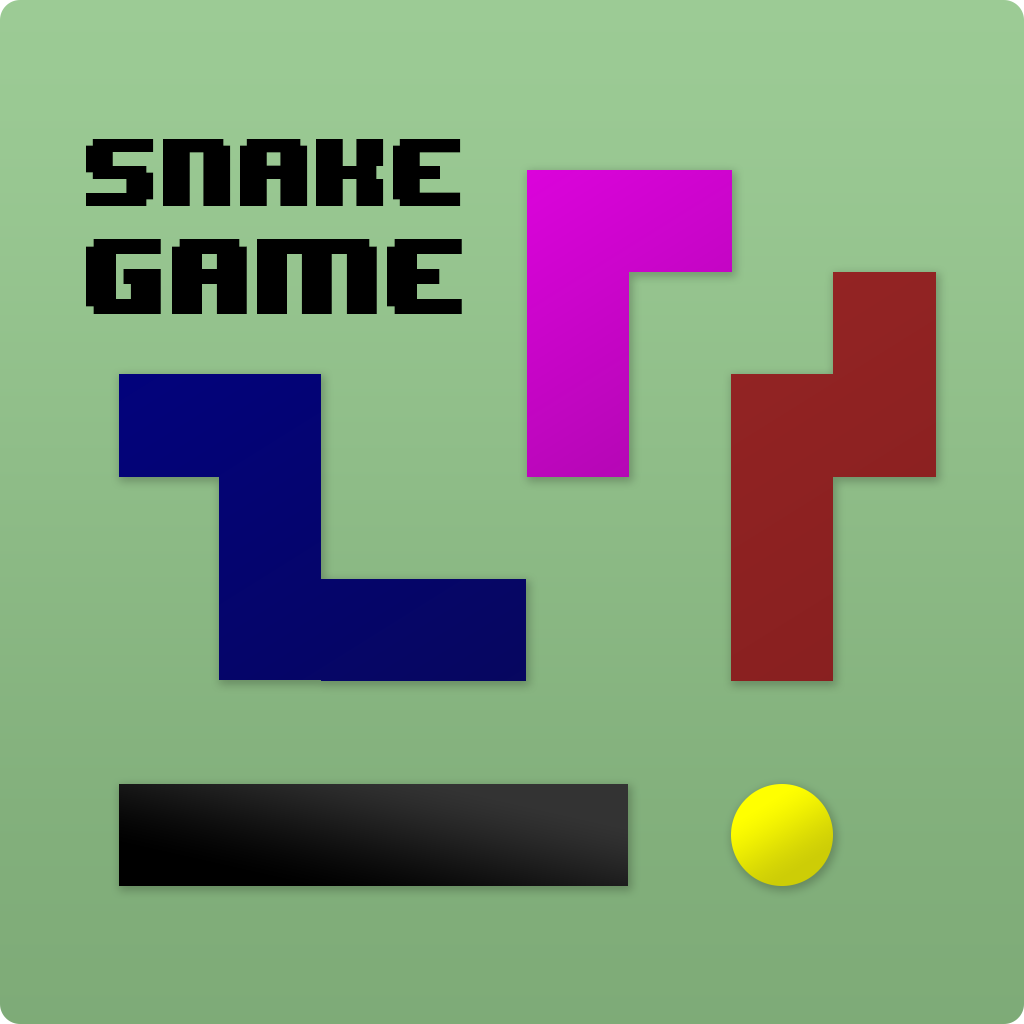
<style>
.page{position:relative;width:1024px;height:1024px}
.page>*{position:absolute;margin:0}
.t1{font:80.6px "8BITWONDERNominal";letter-spacing:-0.05em;color:#000000}
.t2{font:89.9px "8BITWONDERNominal";letter-spacing:-0.05em;color:#000000}
</style>
<div class="page">
<p class="t1" style="left:86px;top:139px;width:376px;height:175px">Snake<br><span class="t2">Game</span></p>
</div>
